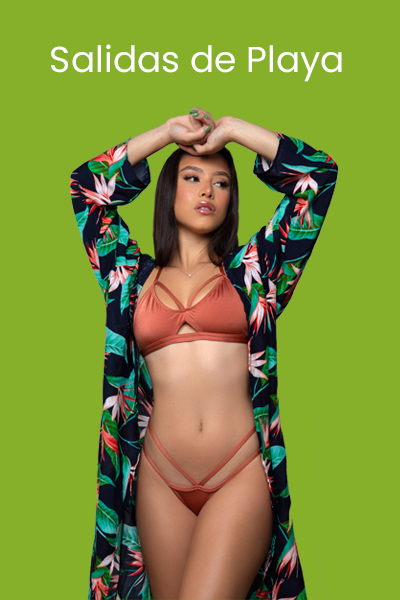
<style>
.page{position:relative;width:400px;height:600px;background:#86b029}
.page>*{position:absolute;margin:0}
.t1{font:36px "Poppins-Regular";color:#ffffff}
</style>
<div class="page">
<p class="t1" style="left:51px;top:44px;width:291px;height:38px">Salidas de Playa</p>
</div>
